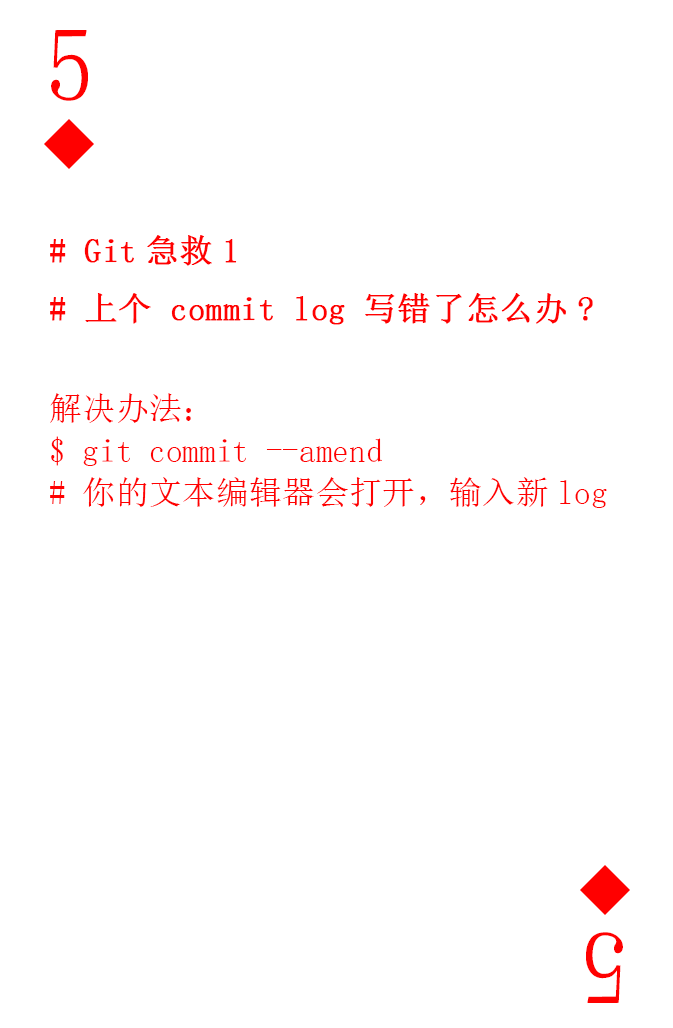
<style>
.page{position:relative;width:673px;height:1028px;background:#ffffff}
.page>*{position:absolute;margin:0}
.t1{font:104.2px "SimSun-ExtB";color:#ff0101;scale:0.93 1}
.t2{font:33.3px/41.7px "SimSun";color:#ff0101}
.t3{font:33.3px "SimSun";color:#ff0101;font-weight:bold}
</style>
<div class="page">
<p class="t1" style="left:51px;top:30px;width:37px;height:71px">5</p>
<p class="t2" style="left:50px;top:235px;width:557px;height:273px"><span class="t3"># Git急救1<br># 上个 commit log 写错了怎么办?<br></span><br>解决办法：<br>$ git commit --amend<br># 你的文本编辑器会打开，输入新log</p>
<p class="t1" style="left:586px;top:932px;width:37px;height:71px;rotate:180deg">5</p>
</div>
